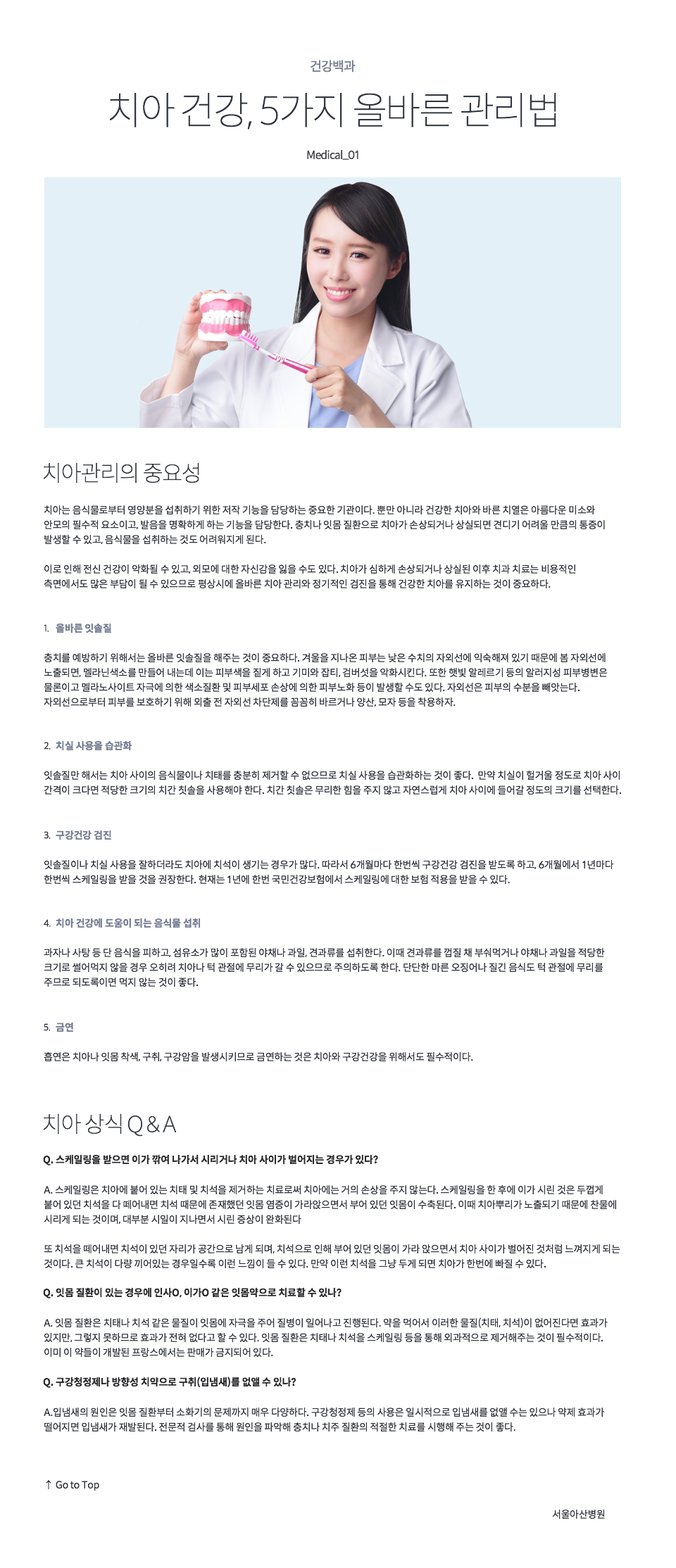
<style>
.page{position:relative;width:676px;height:1568px;background:#ffffff}
.page>*{position:absolute;margin:0}
.t1{font:12.9px "SpoqaHanSans-Regular";letter-spacing:-0.05em;color:#787f94}
.t2{font:38.4px "SpoqaHanSans-Thin";letter-spacing:-0.05em;color:#333741}
.t3{font:11px "SpoqaHanSans-Regular";letter-spacing:-0.05em;color:#47494e}
.t4{font:22.3px "SpoqaHanSans-Thin";letter-spacing:-0.05em;color:#333741;text-transform:uppercase}
.t5{font:9.9px "SpoqaHanSans-Regular";letter-spacing:-0.02em;color:#333741}
.t6{font:9.9px "AppleSDGothicNeo-Regular";letter-spacing:-0.01em;color:#333741;text-transform:uppercase}
.t7{font:9.9px "SpoqaHanSans-Bold";letter-spacing:-0.01em;color:#787f94;text-transform:uppercase}
.t8{font:9.9px "SpoqaHanSans-Bold";letter-spacing:-0.01em;color:#2b2c2f;text-transform:uppercase}
</style>
<div class="page">
<p class="t1" style="left:310px;top:60px;width:45px;height:12px">건강백과</p>
<p class="t2" style="left:109px;top:92px;width:447px;height:37px">치아 건강, 5가지 올바른 관리법</p>
<p class="t3" style="left:307px;top:150px;width:51px;height:10px">Medical_01</p>
<p class="t4" style="left:43px;top:462px;width:156px;height:21px">치아관리의 중요성</p>
<p class="t5" style="left:44px;top:505px;width:561px;height:84px">치아는 음식물로부터 영양분을 섭취하기 위한 저작 기능을 담당하는 중요한 기관이다. 뿐만 아니라 건강한 치아와 바른 치열은 아름다운 미소와 안모의 필수적 요소이고, 발음을 명확하게 하는 기능을 담당한다. 충치나 잇몸 질환으로 치아가 손상되거나 상실되면 견디기 어려울 만큼의 통증이 발생할 수 있고, 음식물을 섭취하는 것도 어려워지게 된다. <br>이로 인해 전신 건강이 악화될 수 있고, 외모에 대한 자신감을 잃을 수도 있다. 치아가 심하게 손상되거나 상실된 이후 치과 치료는 비용적인 측면에서도 많은 부담이 될 수 있으므로 평상시에 올바른 치아 관리와 정기적인 검진을 통해 건강한 치아를 유지하는 것이 중요하다.</p>
<p class="t6" style="left:44px;top:624px;width:5px;height:8px">1.</p>
<p class="t7" style="left:56px;top:623px;width:55px;height:10px">올바른 잇솔질</p>
<p class="t5" style="left:44px;top:653px;width:563px;height:54px">충치를 예방하기 위해서는 올바른 잇솔질을 해주는 것이 중요하다. 겨울을 지나온 피부는 낮은 수치의 자외선에 익숙해져 있기 때문에 봄 자외선에 노출되면, 멜라닌색소를 만들어 내는데 이는 피부색을 짙게 하고 기미와 잡티, 검버섯을 악화시킨다. 또한 햇빛 알레르기 등의 알러지성 피부병변은 물론이고 멜라노사이트 자극에 의한 색소질환 및 피부세포 손상에 의한 피부노화 등이 발생할 수도 있다. 자외선은 피부의 수분을 빼앗는다. 자외선으로부터 피부를 보호하기 위해 외출 전 자외선 차단제를 꼼꼼히 바르거나 양산, 모자 등을 착용하자.</p>
<p class="t6" style="left:44px;top:742px;width:7px;height:8px">2.</p>
<p class="t7" style="left:56px;top:740px;width:76px;height:11px">치실 사용을 습관화</p>
<p class="t5" style="left:44px;top:771px;width:577px;height:24px">잇솔질만 해서는 치아 사이의 음식물이나 치태를 충분히 제거할 수 없으므로 치실 사용을 습관화하는 것이 좋다.  만약 치실이 헐거울 정도로 치아 사이 간격이 크다면 적당한 크기의 치간 칫솔을 사용해야 한다. 치간 칫솔은 무리한 힘을 주지 않고 자연스럽게 치아 사이에 들어갈 정도의 크기를 선택한다.</p>
<p class="t6" style="left:44px;top:831px;width:7px;height:8px">3.</p>
<p class="t7" style="left:56px;top:830px;width:55px;height:10px">구강건강 검진</p>
<p class="t5" style="left:44px;top:860px;width:570px;height:25px">잇솔질이나 치실 사용을 잘하더라도 치아에 치석이 생기는 경우가 많다. 따라서 6개월마다 한번씩 구강건강 검진을 받도록 하고, 6개월에서 1년마다 한번씩 스케일링을 받을 것을 권장한다. 현재는 1년에 한번 국민건강보험에서 스케일링에 대한 보험 적용을 받을 수 있다.</p>
<p class="t7" style="left:56px;top:918px;width:145px;height:10px">치아 건강에 도움이 되는 음식물 섭취</p>
<p class="t6" style="left:44px;top:919px;width:7px;height:8px">4.</p>
<p class="t5" style="left:44px;top:948px;width:561px;height:39px">과자나 사탕 등 단 음식을 피하고, 섬유소가 많이 포함된 야채나 과일, 견과류를 섭취한다. 이때 견과류를 껍질 채 부숴먹거나 야채나 과일을 적당한 크기로 썰어먹지 않을 경우 오히려 치아나 턱 관절에 무리가 갈 수 있으므로 주의하도록 한다. 단단한 마른 오징어나 질긴 음식도 턱 관절에 무리를 주므로 되도록이면 먹지 않는 것이 좋다.</p>
<p class="t6" style="left:44px;top:1023px;width:6px;height:8px">5.</p>
<p class="t7" style="left:56px;top:1022px;width:17px;height:10px">금연</p>
<p class="t5" style="left:44px;top:1051px;width:429px;height:11px">흡연은 치아나 잇몸 착색, 구취, 구강암을 발생시키므로 금연하는 것은 치아와 구강건강을 위해서도 필수적이다.</p>
<p class="t4" style="left:43px;top:1113px;width:134px;height:24px">치아 상식 Q &amp; A</p>
<p class="t8" style="left:43px;top:1154px;width:335px;height:11px">Q. 스케일링을 받으면 이가 깎여 나가서 시리거나 치아 사이가 벌어지는 경우가 있다?</p>
<p class="t5" style="left:44px;top:1185px;width:576px;height:84px">A. 스케일링은 치아에 붙어 있는 치태 및 치석을 제거하는 치료로써 치아에는 거의 손상을 주지 않는다. 스케일링을 한 후에 이가 시린 것은 두껍게 붙어 있던 치석을 다 떼어내면 치석 때문에 존재했던 잇몸 염증이 가라앉으면서 부어 있던 잇몸이 수축된다. 이때 치아뿌리가 노출되기 때문에 찬물에 시리게 되는 것이며, 대부분 시일이 지나면서 시린 증상이 완화된다<br>또 치석을 떼어내면 치석이 있던 자리가 공간으로 남게 되며, 치석으로 인해 부어 있던 잇몸이 가라 앉으면서 치아 사이가 벌어진 것처럼 느껴지게 되는 것이다. 큰 치석이 다량 끼어있는 경우일수록 이런 느낌이 들 수 있다. 만약 이런 치석을 그냥 두게 되면 치아가 한번에 빠질 수 있다.</p>
<p class="t8" style="left:43px;top:1287px;width:298px;height:11px">Q. 잇몸 질환이 있는 경우에 인사O, 이가O 같은 잇몸약으로 치료할 수 있나?</p>
<p class="t5" style="left:44px;top:1317px;width:563px;height:41px">A. 잇몸 질환은 치태나 치석 같은 물질이 잇몸에 자극을 주어 질병이 일어나고 진행된다. 약을 먹어서 이러한 물질(치태, 치석)이 없어진다면 효과가 있지만, 그렇지 못하므로 효과가 전혀 없다고 할 수 있다. 잇몸 질환은 치태나 치석을 스케일링 등을 통해 외과적으로 제거해주는 것이 필수적이다. 이미 이 약들이 개발된 프랑스에서는 판매가 금지되어 있다.</p>
<p class="t8" style="left:43px;top:1377px;width:253px;height:11px">Q. 구강청정제나 방향성 치약으로 구취(입냄새)를 없앨 수 있나?</p>
<p class="t5" style="left:44px;top:1408px;width:560px;height:24px">A.입냄새의 원인은 잇몸 질환부터 소화기의 문제까지 매우 다양하다. 구강청정제 등의 사용은 일시적으로 입냄새를 없앨 수는 있으나 약제 효과가 떨어지면 입냄새가 재발된다. 전문적 검사를 통해 원인을 파악해 충치나 치주 질환의 적절한 치료를 시행해 주는 것이 좋다.</p>
<p class="t5" style="left:46px;top:1479px;width:53px;height:12px">↑ Go to Top</p>
<p class="t5" style="left:552px;top:1510px;width:53px;height:9px">서울아산병원</p>
</div>
